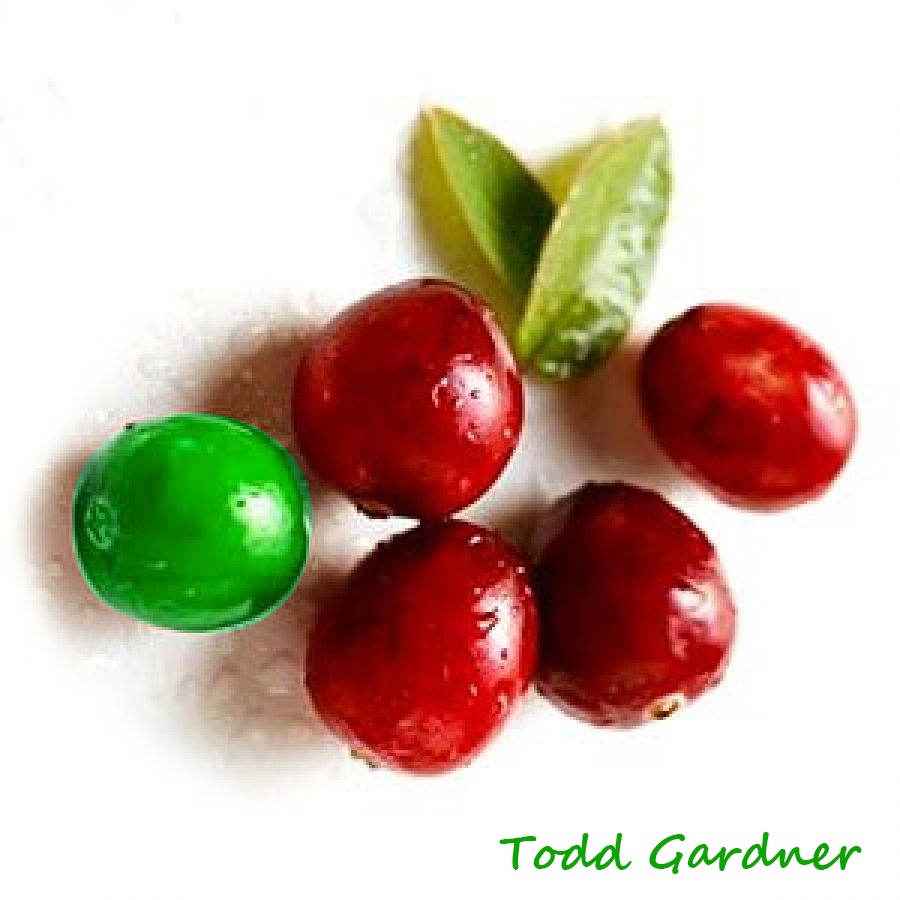
<style>
.page{position:relative;width:900px;height:900px;background:#ffffff}
.page>*{position:absolute;margin:0}
.t1{font:48px "SegoeScript-Bold";color:#0ea305}
</style>
<div class="page">
<p class="t1" style="left:499px;top:832px;width:363px;height:42px">Todd Gardner</p>
</div>
